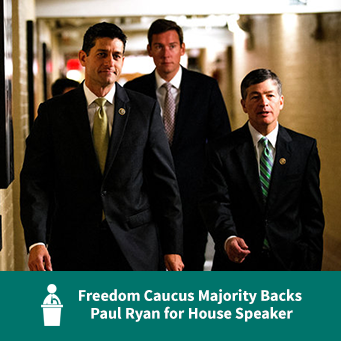
<style>
.page{position:relative;width:341px;height:341px}
.page>*{position:absolute;margin:0}
.t1{font:16px/17.7px "SourceSansPro-Bold";color:#ffffff}
</style>
<div class="page">
<p class="t1" style="left:79px;top:289px;width:223px;height:33px;text-align:center">Freedom Caucus Majority Backs <br>Paul Ryan for House Speaker</p>
</div>
